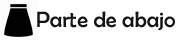
<style>
.page{position:relative;width:180px;height:40px;background:#ffffff}
.page>*{position:absolute;margin:0}
.t1{font:22.2px "BerlinSansFB-Reg";color:#151414}
</style>
<div class="page">
<p class="t1" style="left:37px;top:11px;width:138px;height:20px">Parte de abajo</p>
</div>
